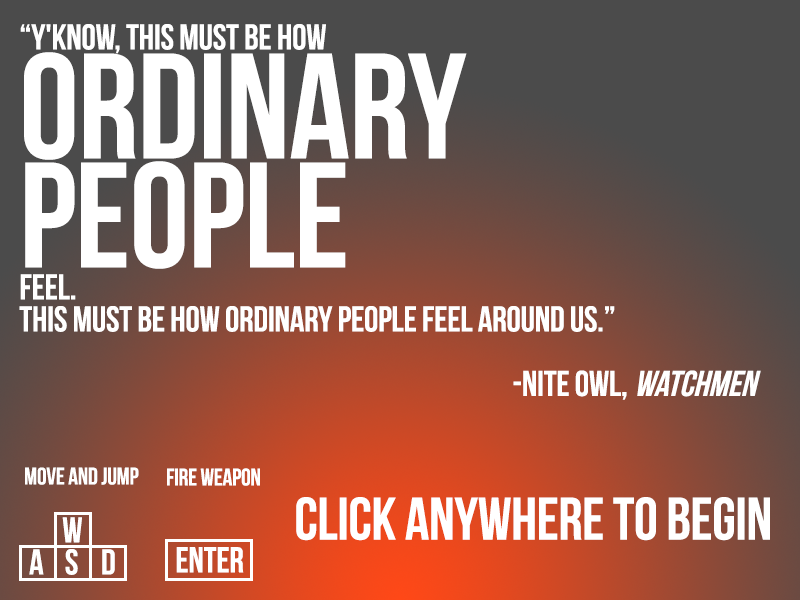
<style>
.page{position:relative;width:800px;height:600px}
.page>*{position:absolute;margin:0}
.t1{font:36px/32px "BebasNeue";letter-spacing:-0.005em;color:#ffffff}
.t2{font:36px/109px "BebasNeue";letter-spacing:-0.005em;color:#ffffff}
.t3{font:150px/109px "BebasNeue";letter-spacing:-0.005em;color:#ffffff}
.t4{font:36px "BebasNeue";letter-spacing:-0.005em;color:#ffffff}
.t5{font:37px "BebasNeue";letter-spacing:-0.005em;color:#ffffff}
.t6{font:24px "BebasNeue";letter-spacing:-0.005em;color:#ffffff}
.t7{font:60px "BebasNeue";letter-spacing:-0.005em;color:#ffffff}
</style>
<div class="page">
<p class="t1" style="left:19px;top:24px;width:596px;height:308px"><span class="t2">“Y'know, this must be how <br></span><span class="t3">ordinary <br>people<br></span>feel. <br>This must be how ordinary people feel around us.”</p>
<p class="t4" style="left:513px;top:370px;width:114px;height:30px">-Nite owl,</p>
<p class="t5" style="left:637px;top:370px;width:124px;height:27px">watchmen</p>
<p class="t6" style="left:25px;top:467px;width:114px;height:18px">move and jump</p>
<p class="t6" style="left:167px;top:468px;width:93px;height:18px">fire weapon</p>
<p class="t7" style="left:296px;top:497px;width:474px;height:44px">click anywhere to begin</p>
<p class="t1" style="left:29px;top:517px;width:86px;height:58px;text-align:center">w<br>a s d</p>
<p class="t4" style="left:176px;top:547px;width:68px;height:26px">enter</p>
</div>
